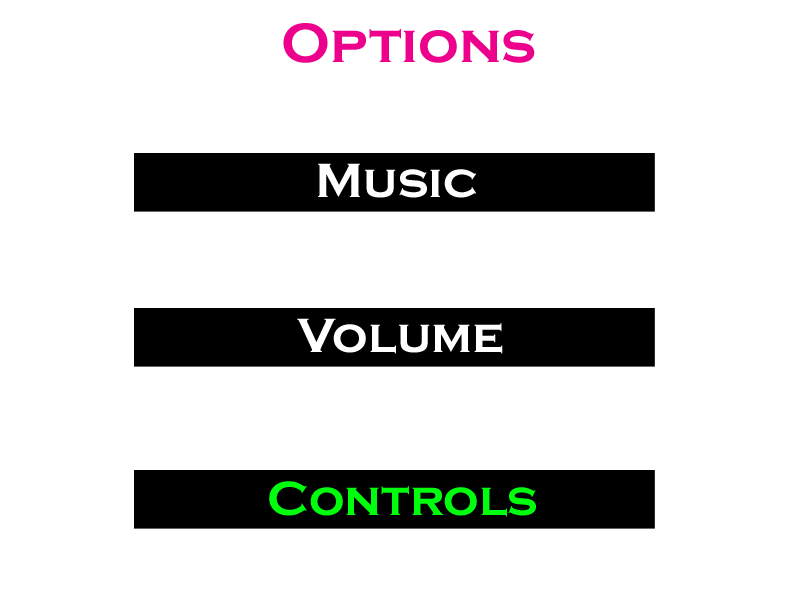
<style>
.page{position:relative;width:800px;height:600px;background:#ffffff}
.page>*{position:absolute;margin:0}
.t1{font:57.4px "CopperplateGothic-Bold";color:#ec008c}
.t2{font:49.8px "CopperplateGothic-Bold";color:#ffffff}
.t3{font:49.8px "CopperplateGothic-Bold";color:#00ff0c}
</style>
<div class="page">
<p class="t1" style="left:283px;top:23px;width:252px;height:40px">Options</p>
<p class="t2" style="left:318px;top:163px;width:159px;height:35px">Music</p>
<p class="t2" style="left:297px;top:318px;width:206px;height:36px">Volume</p>
<p class="t3" style="left:269px;top:481px;width:267px;height:36px">Controls</p>
</div>
